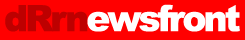
<style>
.page{position:relative;width:245px;height:40px;background:#ff0000}
.page>*{position:absolute;margin:0}
.t1{font:36px "Arial-Black";letter-spacing:-0.08em;color:#ffffff}
.t2{font:36px "Arial-Black";letter-spacing:-0.08em;color:#bd0000}
</style>
<div class="page">
<p class="t1" style="left:5px;top:4px;width:235px;height:28px"><span class="t2">dRrn</span>ewsfront</p>
</div>
